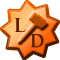
<style>
.page{position:relative;width:60px;height:60px;background:#ffffff}
.page>*{position:absolute;margin:0}
.t1{font:18px "TrajanPro-Bold";color:#543800;scale:1.2 1}
.t2{font:17px "TrajanPro-Bold";color:#543800;font-weight:bold;scale:0.9 1}
</style>
<div class="page">
<p class="t1" style="left:14px;top:18px;width:12px;height:14px">L</p>
<p class="t2" style="left:30px;top:34px;width:14px;height:14px">D</p>
</div>
